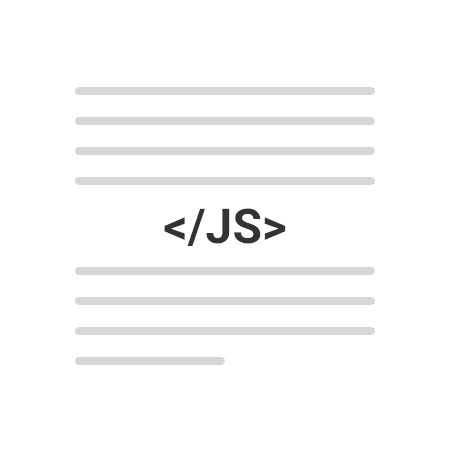
<style>
.page{position:relative;width:450px;height:450px;background:#ffffff}
.page>*{position:absolute;margin:0}
.t1{font:48px "Roboto-Bold";color:#333333}
</style>
<div class="page">
<p class="t1" style="left:164px;top:208px;width:122px;height:38px">&lt;/JS&gt;</p>
</div>
